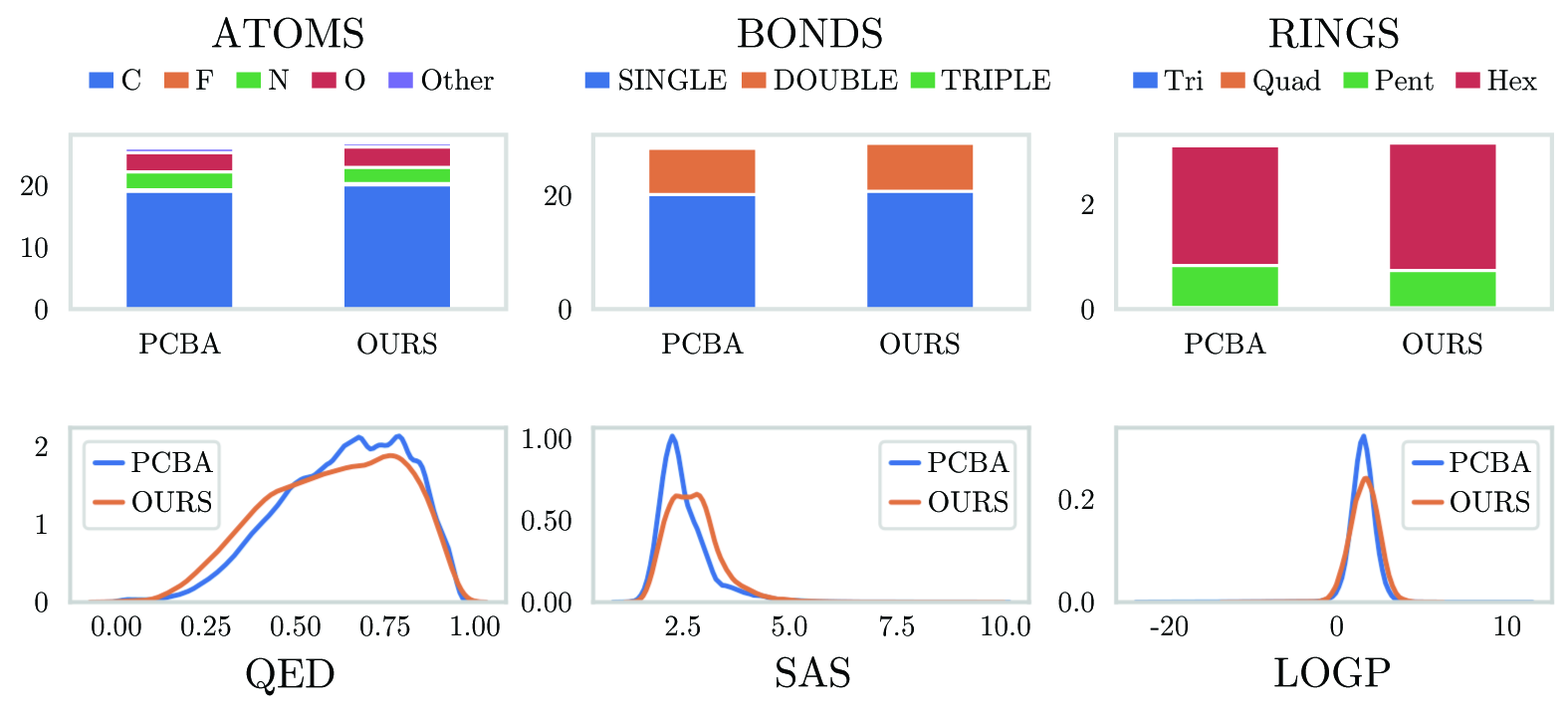
<style>
.page{position:relative;width:1568px;height:726px;background:#ffffff}
.page>*{position:absolute;margin:0}
.t1{font:41.5px "CMUSerif-Roman";color:#060808}
.t2{font:29px "CMUSerif-Roman";color:#060808}
.t3{font:29px/39.4px "CMUSerif-Roman";color:#060808}
</style>
<div class="page">
<p class="t1" style="left:212px;top:17px;width:151px;height:32px">ATOMS</p>
<p class="t1" style="left:738px;top:17px;width:144px;height:32px">BONDS</p>
<p class="t1" style="left:1269px;top:17px;width:130px;height:32px">RINGS</p>
<p class="t2" style="left:122px;top:69px;width:18px;height:22px">C</p>
<p class="t2" style="left:196px;top:70px;width:17px;height:20px">F</p>
<p class="t2" style="left:269px;top:69px;width:20px;height:21px">N</p>
<p class="t2" style="left:345px;top:69px;width:20px;height:22px">O</p>
<p class="t2" style="left:422px;top:69px;width:72px;height:22px">Other</p>
<p class="t2" style="left:619px;top:69px;width:108px;height:22px">SINGLE</p>
<p class="t2" style="left:774px;top:69px;width:124px;height:22px">DOUBLE</p>
<p class="t2" style="left:941px;top:69px;width:109px;height:22px">TRIPLE</p>
<p class="t2" style="left:1164px;top:70px;width:40px;height:21px">Tri</p>
<p class="t2" style="left:1253px;top:69px;width:68px;height:27px">Quad</p>
<p class="t2" style="left:1375px;top:70px;width:59px;height:21px">Pent</p>
<p class="t2" style="left:1487px;top:70px;width:50px;height:21px">Hex</p>
<p class="t2" style="left:21px;top:175px;width:27px;height:21px">20</p>
<p class="t2" style="left:545px;top:185px;width:26px;height:21px">20</p>
<p class="t2" style="left:1081px;top:194px;width:13px;height:20px">2</p>
<p class="t2" style="left:22px;top:237px;width:26px;height:21px">10</p>
<p class="t2" style="left:35px;top:299px;width:13px;height:21px">0</p>
<p class="t2" style="left:559px;top:299px;width:12px;height:21px">0</p>
<p class="t2" style="left:1081px;top:299px;width:13px;height:21px">0</p>
<p class="t2" style="left:139px;top:332px;width:82px;height:22px">PCBA</p>
<p class="t2" style="left:357px;top:333px;width:80px;height:21px">OURS</p>
<p class="t2" style="left:662px;top:332px;width:82px;height:22px">PCBA</p>
<p class="t2" style="left:880px;top:333px;width:80px;height:21px">OURS</p>
<p class="t2" style="left:1185px;top:332px;width:81px;height:22px">PCBA</p>
<p class="t2" style="left:1403px;top:333px;width:79px;height:21px">OURS</p>
<p class="t2" style="left:35px;top:436px;width:13px;height:20px">2</p>
<p class="t2" style="left:523px;top:428px;width:48px;height:21px">1.00</p>
<p class="t3" style="left:131px;top:451px;width:82px;height:62px">PCBA<br>OURS</p>
<p class="t3" style="left:928px;top:451px;width:81px;height:62px">PCBA<br>OURS</p>
<p class="t3" style="left:1450px;top:451px;width:81px;height:62px">PCBA<br>OURS</p>
<p class="t2" style="left:1058px;top:489px;width:36px;height:21px">0.2</p>
<p class="t2" style="left:522px;top:510px;width:49px;height:21px">0.50</p>
<p class="t2" style="left:36px;top:514px;width:11px;height:20px">1</p>
<p class="t2" style="left:35px;top:591px;width:13px;height:21px">0</p>
<p class="t2" style="left:522px;top:591px;width:49px;height:21px">0.00</p>
<p class="t2" style="left:1058px;top:591px;width:36px;height:21px">0.0</p>
<p class="t2" style="left:92px;top:615px;width:49px;height:21px">0.00</p>
<p class="t2" style="left:181px;top:615px;width:50px;height:21px">0.25</p>
<p class="t2" style="left:271px;top:615px;width:50px;height:21px">0.50</p>
<p class="t2" style="left:360px;top:615px;width:50px;height:21px">0.75</p>
<p class="t2" style="left:451px;top:615px;width:49px;height:21px">1.00</p>
<p class="t2" style="left:665px;top:615px;width:35px;height:21px">2.5</p>
<p class="t2" style="left:772px;top:615px;width:35px;height:21px">5.0</p>
<p class="t2" style="left:880px;top:615px;width:34px;height:21px">7.5</p>
<p class="t2" style="left:982px;top:615px;width:48px;height:21px">10.0</p>
<p class="t2" style="left:1150px;top:615px;width:38px;height:21px">-20</p>
<p class="t2" style="left:1330px;top:615px;width:13px;height:21px">0</p>
<p class="t2" style="left:1494px;top:615px;width:26px;height:21px">10</p>
<p class="t1" style="left:246px;top:657px;width:89px;height:39px">QED</p>
<p class="t1" style="left:777px;top:656px;width:73px;height:32px">SAS</p>
<p class="t1" style="left:1274px;top:656px;width:116px;height:32px">LOGP</p>
</div>
